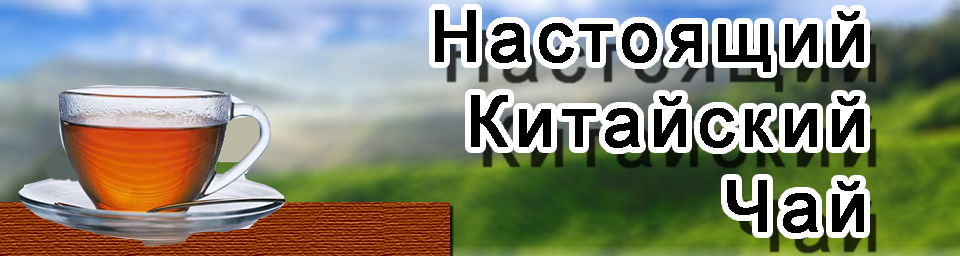
<style>
.page{position:relative;width:960px;height:256px}
.page>*{position:absolute;margin:0}
.t1{font:70.6px "ArialMT";letter-spacing:0.09em;color:#000000;font-weight:bold}
</style>
<div class="page">
<p class="t1" style="left:435px;top:10px;width:429px;height:223px;text-align:right">Настоящий<br>Китайский<br>Чай</p>
</div>
